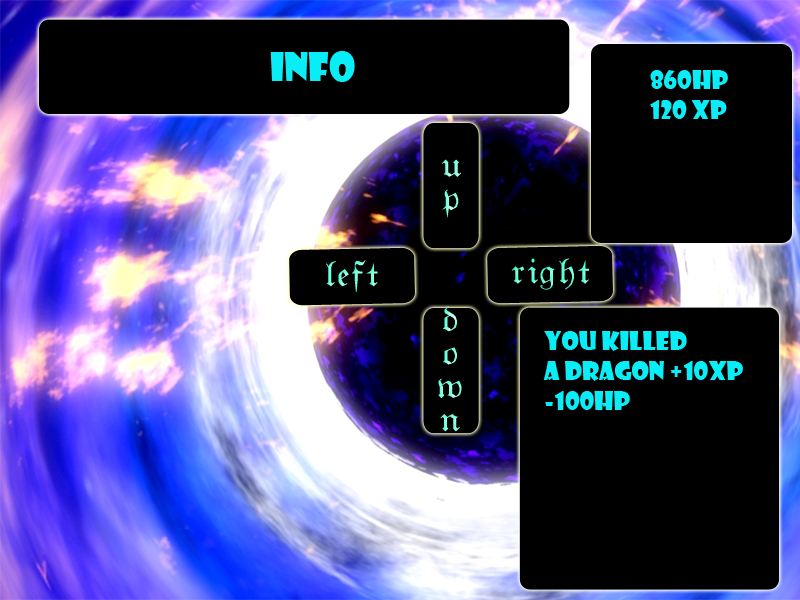
<style>
.page{position:relative;width:800px;height:600px;background:#000000}
.page>*{position:absolute;margin:0}
.t1{font:37.5px "ShowcardGothic-Reg";color:#09eef6}
.t2{font:25px "ShowcardGothic-Reg";color:#09eef6}
</style>
<div class="page">
<p class="t1" style="left:270px;top:51px;width:85px;height:31px">Info</p>
<p class="t2" style="left:650px;top:70px;width:78px;height:49px">860HP<br>120 XP</p>
<p class="t2" style="left:543px;top:331px;width:200px;height:79px">You killed<br>a DRAGON +10xP<br>-100hp</p>
</div>
